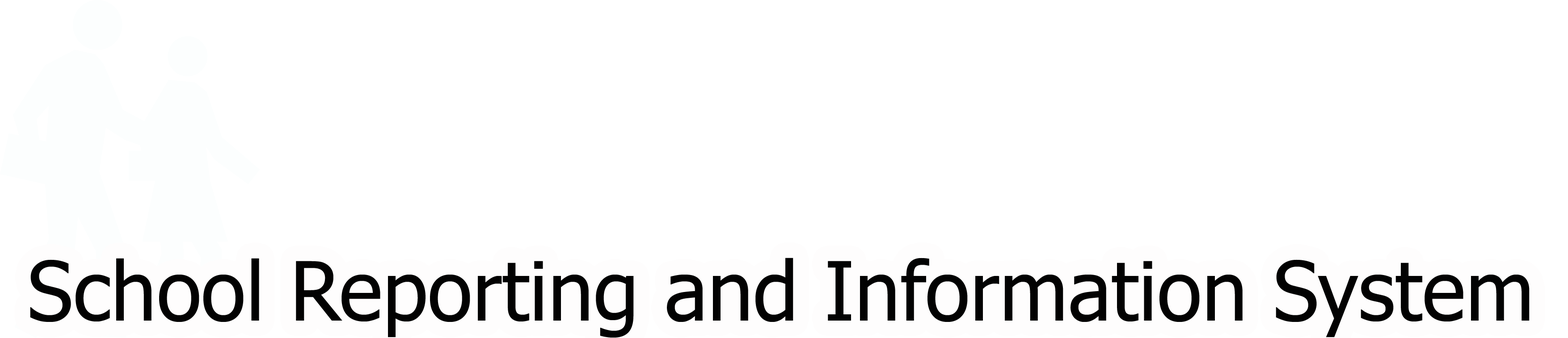
<style>
.page{position:relative;width:1568px;height:338px;background:#ffffff}
.page>*{position:absolute;margin:0}
.t1{font:81.9px "Tahoma";color:#020202}
</style>
<div class="page">
<p class="t1" style="left:30px;top:258px;width:1500px;height:80px">School Reporting and Information System</p>
</div>
